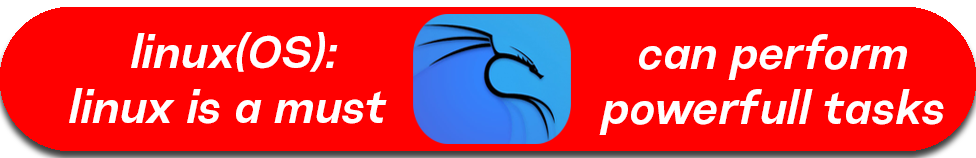
<style>
.page{position:relative;width:976px;height:158px;background:#ff0000}
.page>*{position:absolute;margin:0}
.t1{font:45.8px "ResistSansDisplay-MediumOblique";letter-spacing:0.02em;color:#ffffff}
</style>
<div class="page">
<p class="t1" style="left:69px;top:32px;width:318px;height:92px;text-align:center">linux(OS):<br>linux is a must</p>
<p class="t1" style="left:599px;top:34px;width:345px;height:101px;text-align:center">can perform<br>powerfull tasks</p>
</div>
